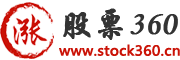
<style>
.page{position:relative;width:180px;height:60px;background:#ffffff}
.page>*{position:absolute;margin:0}
.t1{font:34px "MonotypeCorsiva";color:#333333;font-weight:bold}
.t2{font:34px "STXingkai";color:#333333;font-weight:bold}
.t3{font:13.5px "MicrosoftYaHei";color:#ca1206;font-weight:bold;scale:1.04 1}
</style>
<div class="page">
<p class="t1" style="left:63px;top:8px;width:115px;height:32px"><span class="t2">股票</span>360</p>
<p class="t3" style="left:59px;top:44px;width:121px;height:12px">www.stock360.cn</p>
</div>
